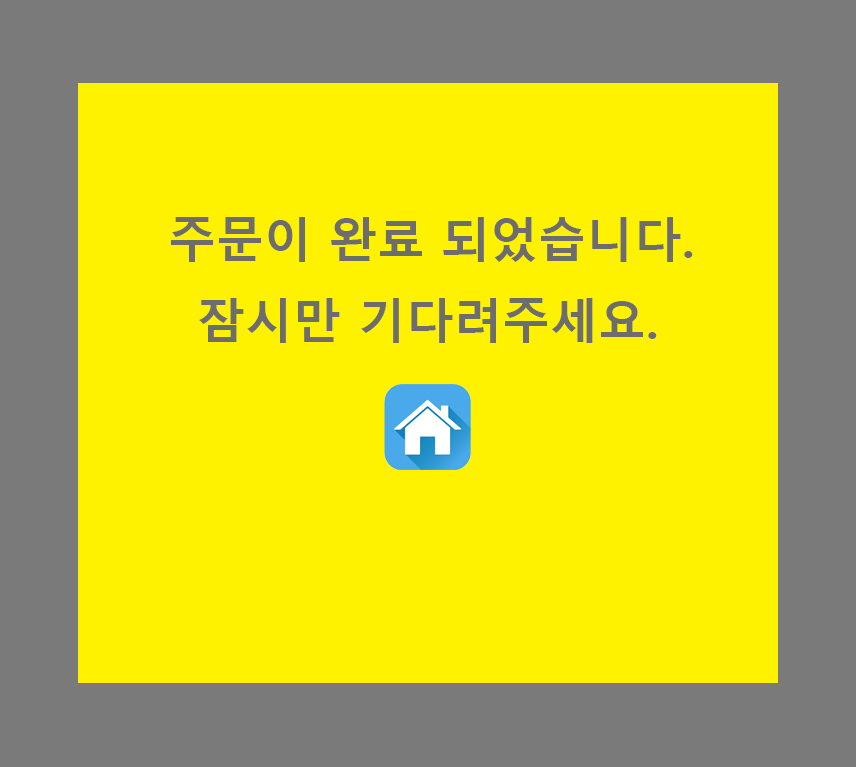
<style>
.page{position:relative;width:856px;height:767px;background:#fff200}
.page>*{position:absolute;margin:0}
.t1{font:48px "MalgunGothicBold";color:#6d6d6d}
</style>
<div class="page">
<p class="t1" style="left:171px;top:217px;width:522px;height:45px">주문이 완료 되었습니다.</p>
<p class="t1" style="left:199px;top:298px;width:458px;height:45px">잠시만 기다려주세요.</p>
</div>
